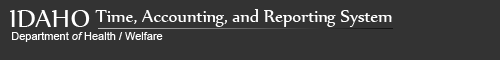
<style>
.page{position:relative;width:500px;height:60px;background:#333333}
.page>*{position:absolute;margin:0}
.t1{font:30px "Nyala-Regular";color:#ffffff}
.t2{font:20px "Nyala-Regular";color:#ffffff}
.t3{font:21px "Nyala-Regular";color:#ffffff}
.t4{font:11px "ArialMT";color:#ffffff}
.t5{font:11px "Arial-ItalicMT";color:#ffffff}
</style>
<div class="page">
<p class="t1" style="left:10px;top:10px;width:80px;height:17px">IDAHO</p>
<p class="t2" style="left:95px;top:9px;width:297px;height:18px"><span class="t3">T</span>ime, <span class="t3">A</span>ccounting, and <span class="t3">R</span>eporting <span class="t3">S</span>ystem</p>
<p class="t4" style="left:12px;top:32px;width:151px;height:10px">Department <span class="t5">of</span> Health / Welfare</p>
</div>
